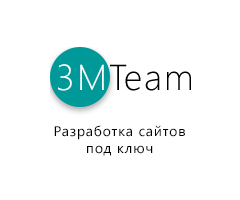
<style>
.page{position:relative;width:240px;height:200px;background:#ffffff}
.page>*{position:absolute;margin:0}
.t1{font:14px "SegoeUI";letter-spacing:0.06em;color:#000000}
</style>
<div class="page">
<p class="t1" style="left:54px;top:125px;width:131px;height:31px;text-align:center">Разработка сайтов <br>под ключ</p>
</div>
